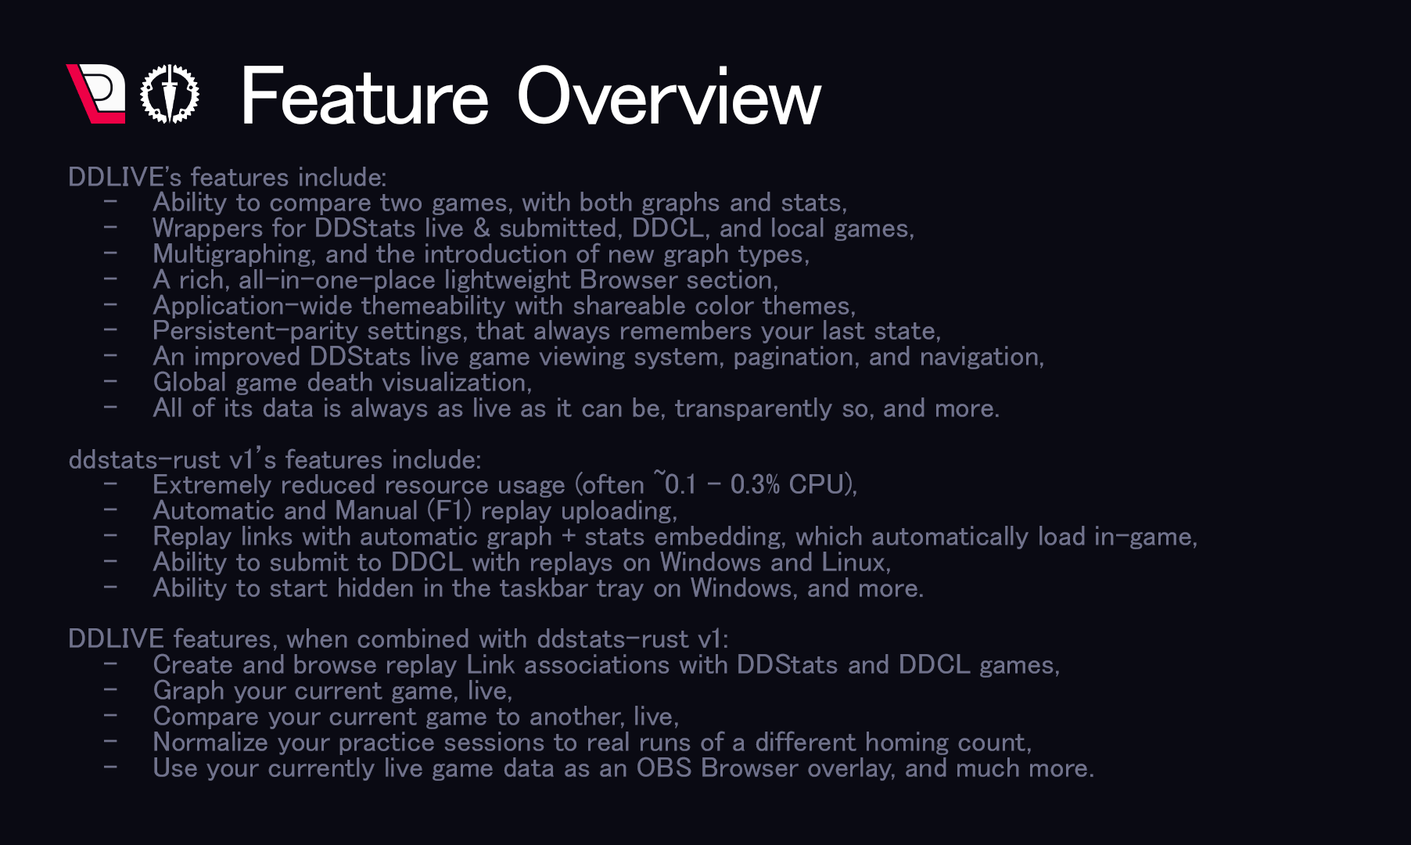
<style>
.page{position:relative;width:1411px;height:845px;background:#0a0a13}
.page>*{position:absolute;margin:0}
.t1{font:85.7px "MS-PGothic";letter-spacing:-0.025em;color:#ffffff}
.t2{font:28.7px/25.7px "MS-PGothic";color:#70728c}
</style>
<div class="page">
<p class="t1" style="left:244px;top:65px;width:578px;height:59px">Feature Overview</p>
<p class="t2" style="left:69px;top:166px;width:1128px;height:615px">DDLIVE's features include:<br>    -    Ability to compare two games, with both graphs and stats,<br>    -    Wrappers for DDStats live &amp; submitted, DDCL, and local games,<br>    -    Multigraphing, and the introduction of new graph types,<br>    -    A rich, all-in-one-place lightweight Browser section,<br>    -    Application-wide themeability with shareable color themes,<br>    -    Persistent-parity settings, that always remembers your last state,<br>    -    An improved DDStats live game viewing system, pagination, and navigation,<br>    -    Global game death visualization,<br>    -    All of its data is always as live as it can be, transparently so, and more.<br><br>ddstats-rust v1’s features include:<br>    -    Extremely reduced resource usage (often ~0.1 - 0.3% CPU),<br>    -    Automatic and Manual (F1) replay uploading,<br>    -    Replay links with automatic graph + stats embedding, which automatically load in-game,<br>    -    Ability to submit to DDCL with replays on Windows and Linux,<br>    -    Ability to start hidden in the taskbar tray on Windows, and more.<br><br>DDLIVE features, when combined with ddstats-rust v1:<br>    -    Create and browse replay Link associations with DDStats and DDCL games,<br>    -    Graph your current game, live,<br>    -    Compare your current game to another, live,<br>    -    Normalize your practice sessions to real runs of a different homing count,<br>    -    Use your currently live game data as an OBS Browser overlay, and much more.</p>
</div>
